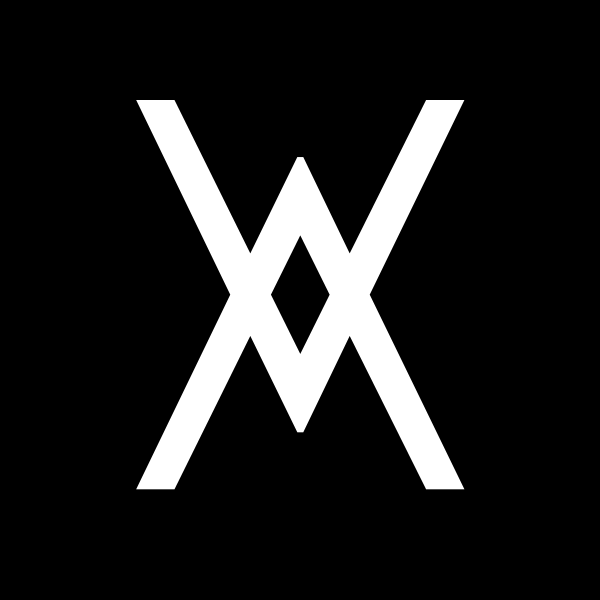
<style>
.page{position:relative;width:600px;height:600px;background:#000000}
.page>*{position:absolute;margin:0}
.t1{font:588px "STIXGeneral-Regular";color:#ffffff}
</style>
<div class="page">
<p class="t1" style="left:136px;top:100px;width:329px;height:390px">⩙</p>
</div>
